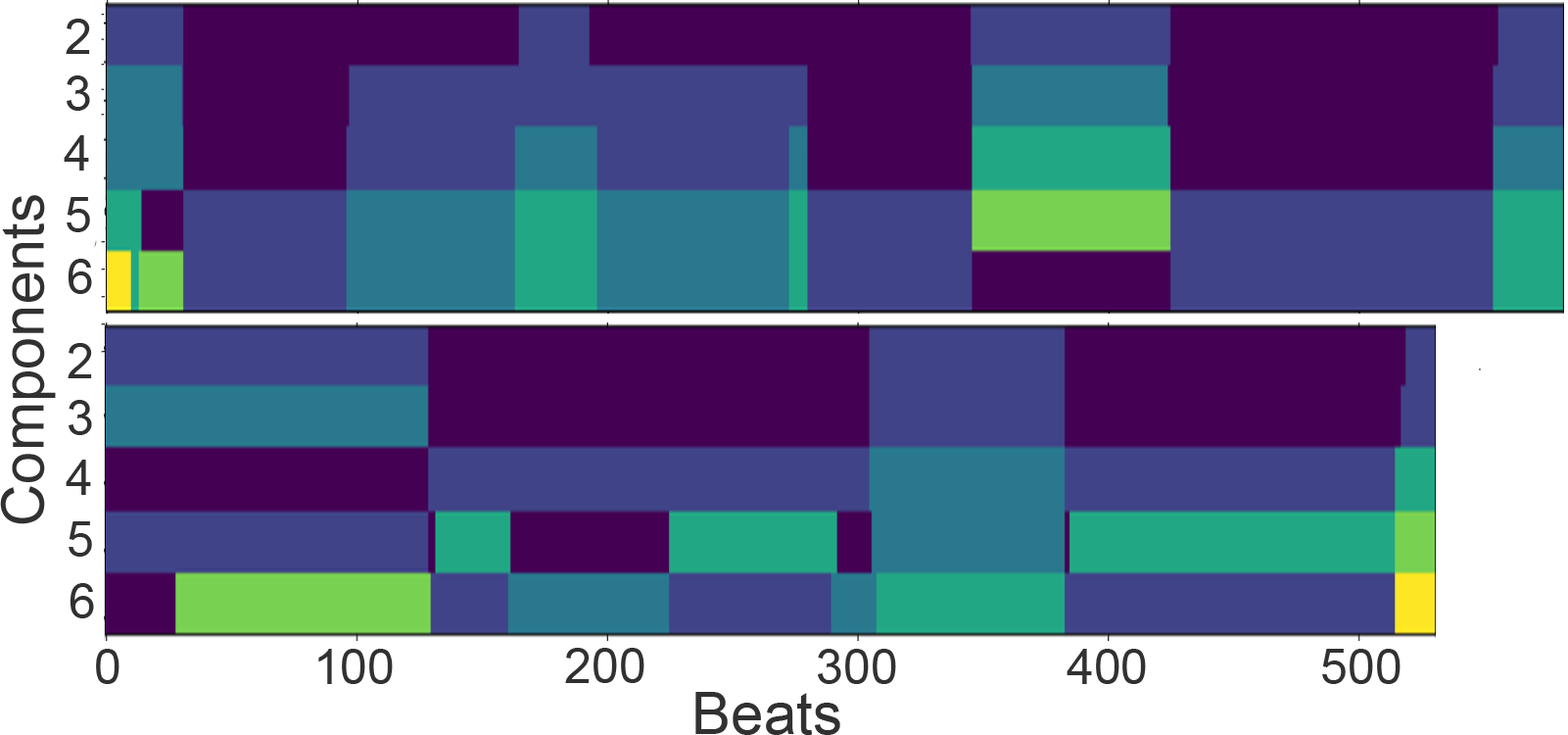
<style>
.page{position:relative;width:1568px;height:735px;background:#404387}
.page>*{position:absolute;margin:0}
.t1{font:49px "ArialMT";color:#313131}
.t2{font:58.8px "ArialMT";color:#313131}
</style>
<div class="page">
<p class="t1" style="left:66px;top:19px;width:24px;height:35px">2</p>
<p class="t1" style="left:67px;top:75px;width:23px;height:36px">3</p>
<p class="t1" style="left:64px;top:135px;width:25px;height:35px">4</p>
<p class="t2" style="left:0px;top:195px;width:56px;height:329px;rotate:-90deg">Components</p>
<p class="t1" style="left:67px;top:197px;width:23px;height:35px">5</p>
<p class="t1" style="left:68px;top:259px;width:24px;height:35px">6</p>
<p class="t1" style="left:68px;top:343px;width:24px;height:35px">2</p>
<p class="t1" style="left:69px;top:400px;width:23px;height:35px">3</p>
<p class="t1" style="left:66px;top:459px;width:25px;height:36px">4</p>
<p class="t1" style="left:69px;top:521px;width:23px;height:35px">5</p>
<p class="t1" style="left:70px;top:583px;width:24px;height:35px">6</p>
<p class="t1" style="left:96px;top:648px;width:23px;height:36px">0</p>
<p class="t1" style="left:318px;top:648px;width:75px;height:36px">100</p>
<p class="t1" style="left:565px;top:647px;width:79px;height:36px">200</p>
<p class="t1" style="left:818px;top:648px;width:78px;height:36px">300</p>
<p class="t1" style="left:1067px;top:648px;width:79px;height:36px">400</p>
<p class="t1" style="left:1322px;top:648px;width:79px;height:36px">500</p>
<p class="t2" style="left:695px;top:691px;width:145px;height:44px">Beats</p>
</div>
